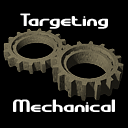
<style>
.page{position:relative;width:128px;height:128px;background:#000000}
.page>*{position:absolute;margin:0}
.t1{font:18px "GravitateBRK";color:#ffffff}
</style>
<div class="page">
<p class="t1" style="left:20px;top:13px;width:88px;height:16px">Targeting</p>
<p class="t1" style="left:13px;top:99px;width:102px;height:13px">Mechanical</p>
</div>
